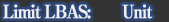
<style>
.page{position:relative;width:169px;height:22px;background:#333333}
.page>*{position:absolute;margin:0}
.t1{font:18px "RyuminPro-ExBold";letter-spacing:-0.08em;color:#edeff1;font-weight:bold;scale:0.9 1}
</style>
<div class="page">
<p class="t1" style="left:3px;top:4px;width:150px;height:15px">Limit LBAS:       Unit</p>
</div>
